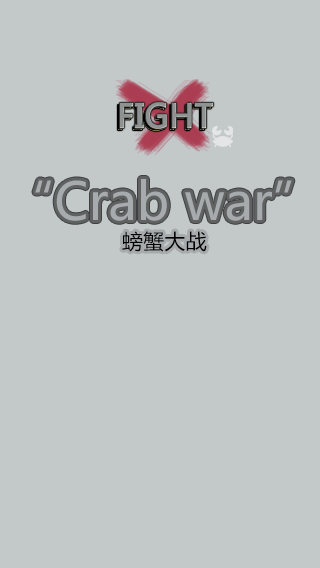
<style>
.page{position:relative;width:320px;height:568px;background:#c3c8c9}
.page>*{position:absolute;margin:0}
.t1{font:32.4px "MicrosoftYaHei";color:#8f9293;text-transform:uppercase;font-weight:bold}
.t2{font:20.7px "MicrosoftYaHei";color:#000000}
</style>
<div class="page">
<p class="t1" style="left:120px;top:102px;width:93px;height:27px">fight</p>
<p class="t2" style="left:122px;top:231px;width:85px;height:21px">螃蟹大战</p>
</div>
